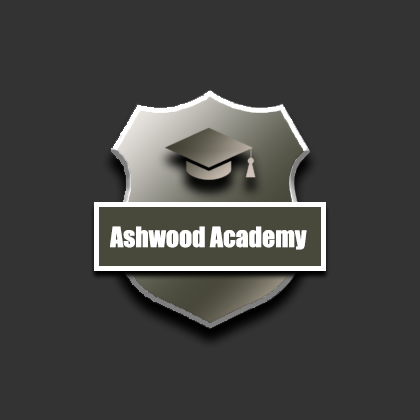
<style>
.page{position:relative;width:420px;height:420px;background:#333333}
.page>*{position:absolute;margin:0}
.t1{font:25.7px "Impact";color:#ffffff}
</style>
<div class="page">
<p class="t1" style="left:110px;top:226px;width:197px;height:24px">Ashwood Academy</p>
</div>
